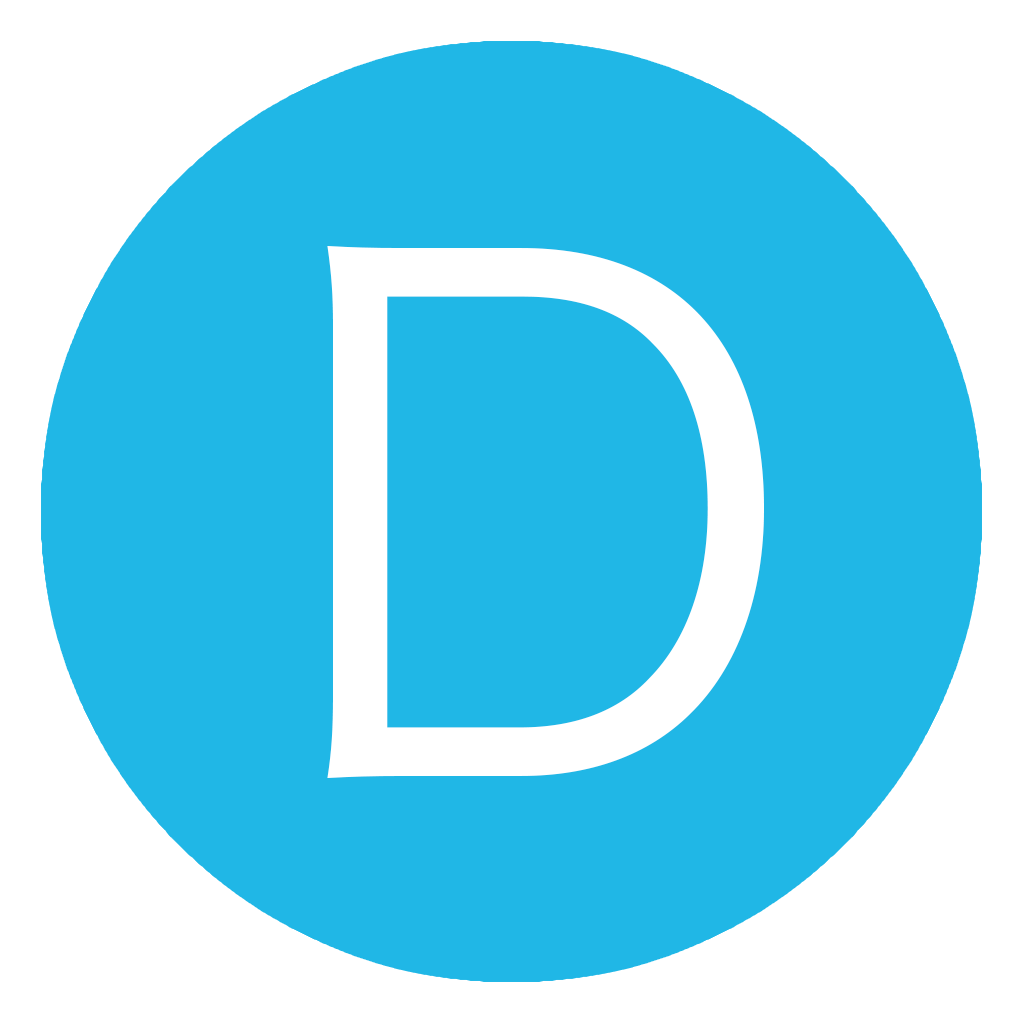
<style>
.page{position:relative;width:1024px;height:1024px;background:#20b7e6}
.page>*{position:absolute;margin:0}
.t1{font:694px "HiraginoSansGB-W3";color:#ffffff}
</style>
<div class="page">
<p class="t1" style="left:327px;top:246px;width:437px;height:532px">D</p>
</div>
